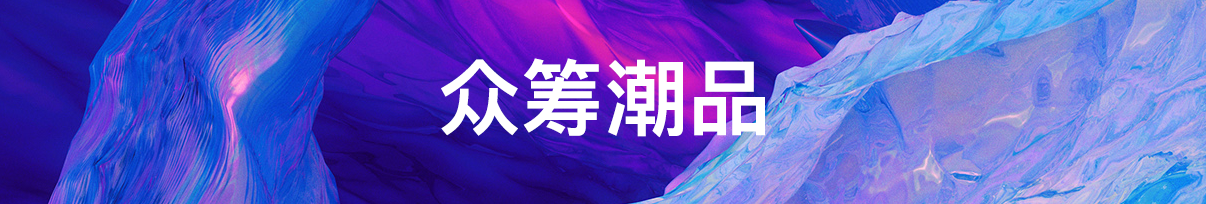
<style>
.page{position:relative;width:1206px;height:204px}
.page>*{position:absolute;margin:0}
.t1{font:83.3px "PingFang-SC-Semibold";color:#ffffff}
</style>
<div class="page">
<p class="t1" style="left:441px;top:58px;width:324px;height:80px">众筹潮品</p>
</div>
